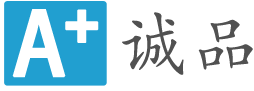
<style>
.page{position:relative;width:254px;height:91px;background:#ffffff}
.page>*{position:absolute;margin:0}
.t1{font:86.1px "AdobeHeitiStd-Regular";letter-spacing:0.05em;color:#ffffff;font-weight:bold;scale:0.95 1}
.t2{font:58.8px "BlackoakStd";letter-spacing:0.05em;color:#ffffff;font-weight:bold;scale:0.95 1}
.t3{font:70.4px "STKaiti";letter-spacing:0.09em;color:#515151;scale:0.95 1}
</style>
<div class="page">
<p class="t1" style="left:12px;top:9px;width:54px;height:69px">A</p>
<p class="t2" style="left:65px;top:9px;width:34px;height:34px">+</p>
<p class="t3" style="left:122px;top:12px;width:131px;height:63px">诚品</p>
</div>
